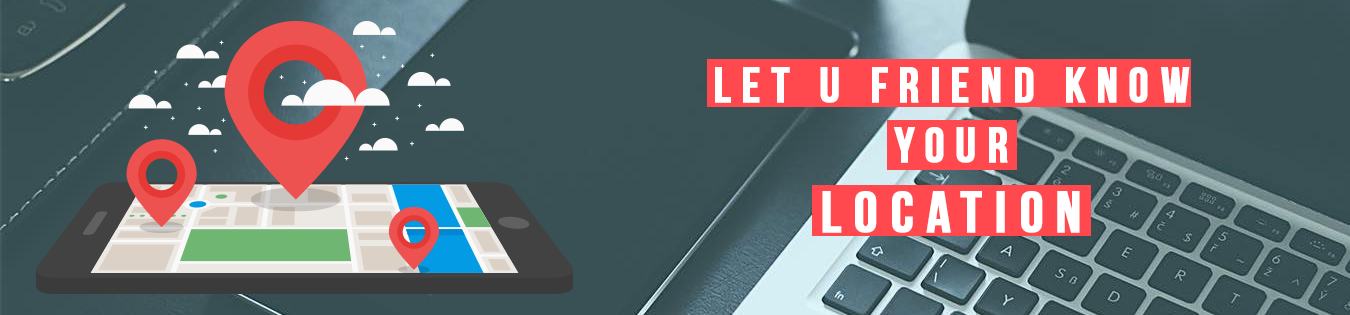
<style>
.page{position:relative;width:1350px;height:315px}
.page>*{position:absolute;margin:0}
.t1{font:50px "BebasNeueBold";letter-spacing:0.2em;color:#ffffff;font-weight:bold}
.t2{font:58.3px "BebasNeueBold";letter-spacing:0.2em;color:#ffffff;font-weight:bold}
</style>
<div class="page">
<p class="t1" style="left:715px;top:67px;width:475px;height:166px;text-align:center">Let u friend know<br>your<br><span class="t2">location</span></p>
</div>
